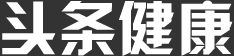
<style>
.page{position:relative;width:234px;height:56px;background:#ffffff}
.page>*{position:absolute;margin:0}
.t1{font:58.8px "HYk2gj";letter-spacing:0.02em;color:#ffffff}
</style>
<div class="page">
<p class="t1" style="left:2px;top:0px;width:231px;height:56px">头条健康</p>
</div>
